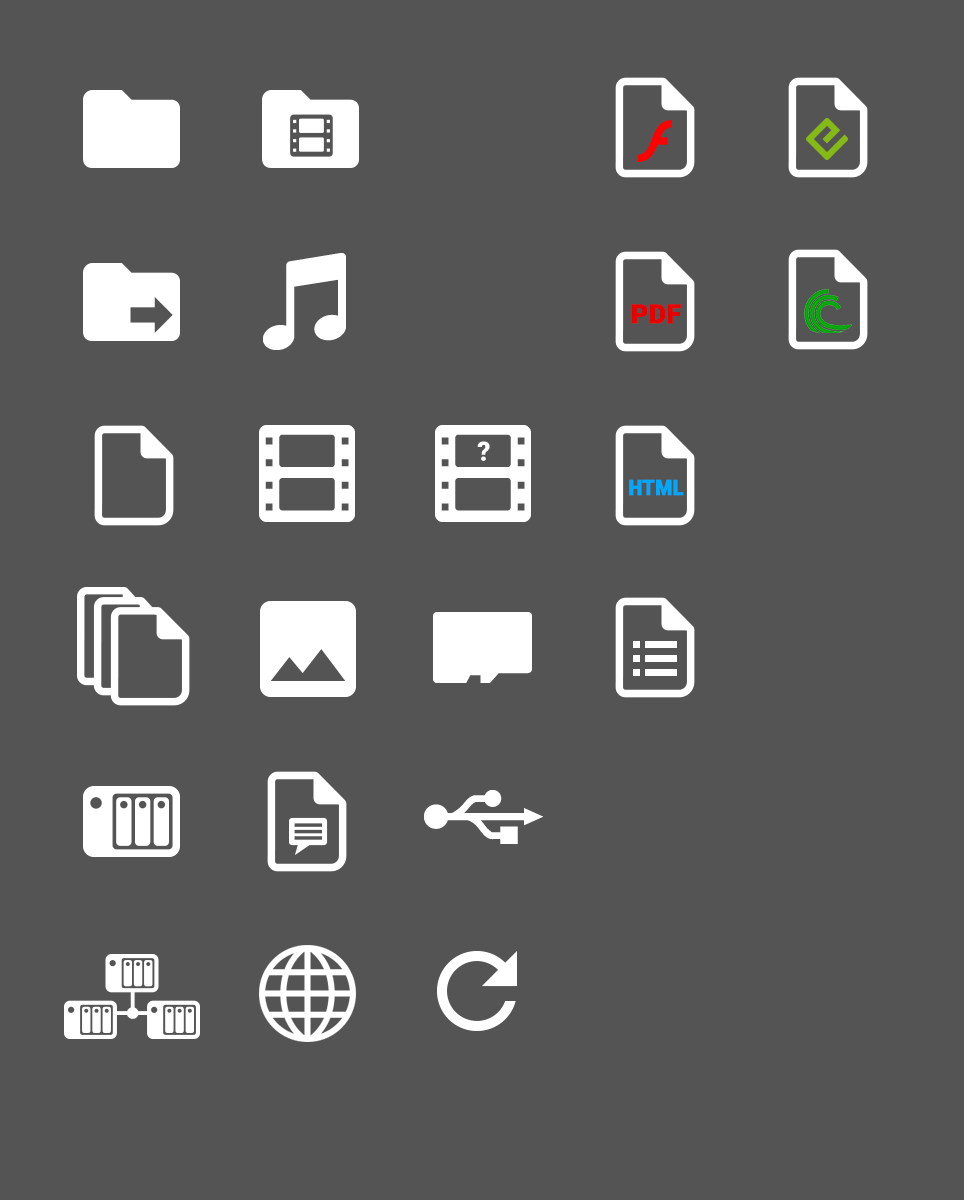
<style>
.page{position:relative;width:964px;height:1200px;background:#545454}
.page>*{position:absolute;margin:0}
.t1{font:26.4px "Roboto-Black";color:#e60000;text-transform:uppercase;font-weight:bold}
.t2{font:21.6px "Roboto-Black";color:#00a8ff;text-transform:uppercase;font-weight:bold;scale:0.9 1}
</style>
<div class="page">
<p class="t1" style="left:632px;top:304px;width:49px;height:20px">pdf</p>
<p class="t2" style="left:629px;top:479px;width:55px;height:17px">HTML</p>
</div>
